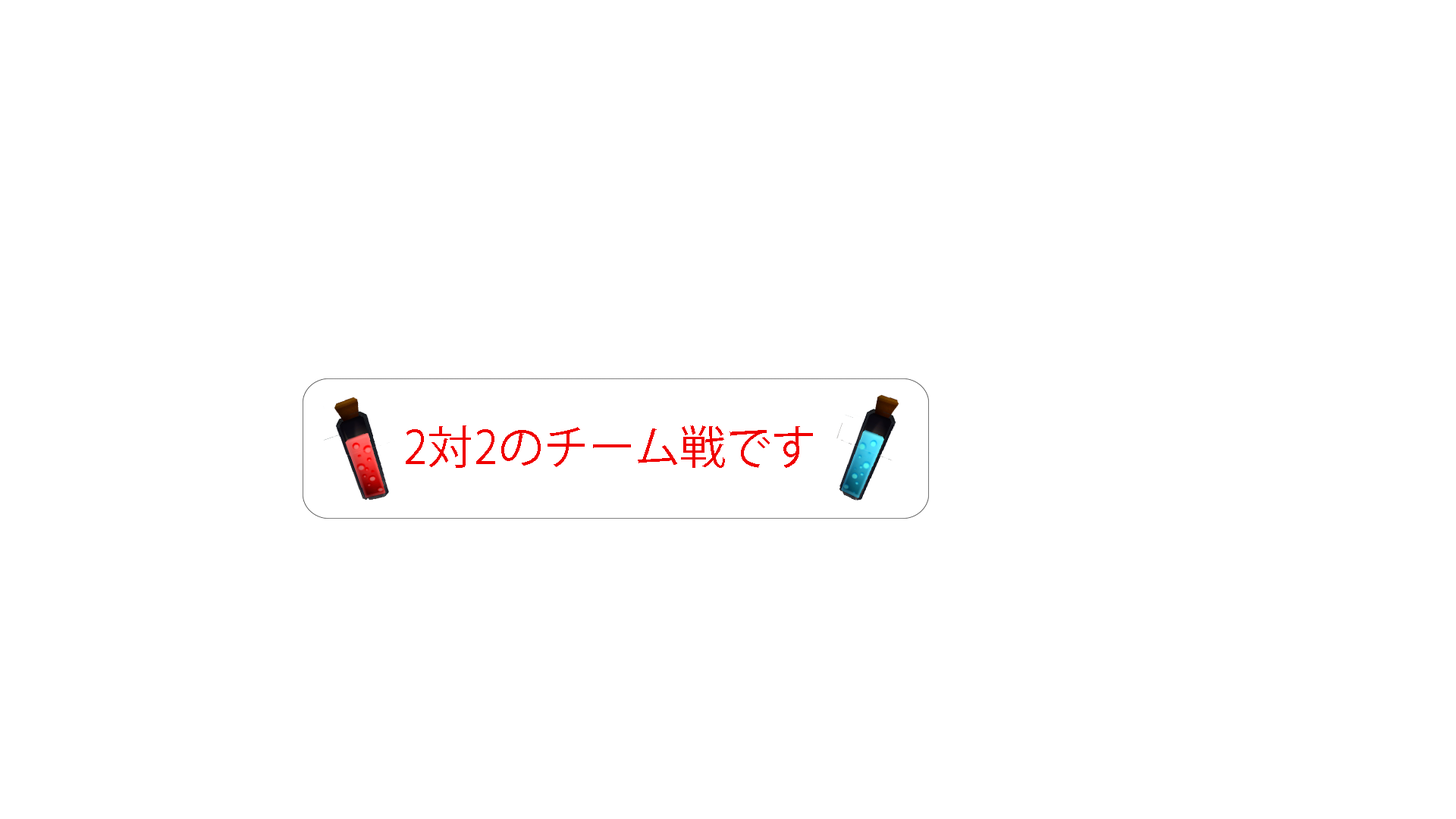
<style>
.page{position:relative;width:1456px;height:819px;background:#ffffff}
.page>*{position:absolute;margin:0}
.t1{font:45.5px "KozGoPr6N-Regular";color:#f00000}
</style>
<div class="page">
<p class="t1" style="left:406px;top:425px;width:407px;height:43px">2対2のチーム戦です</p>
</div>
